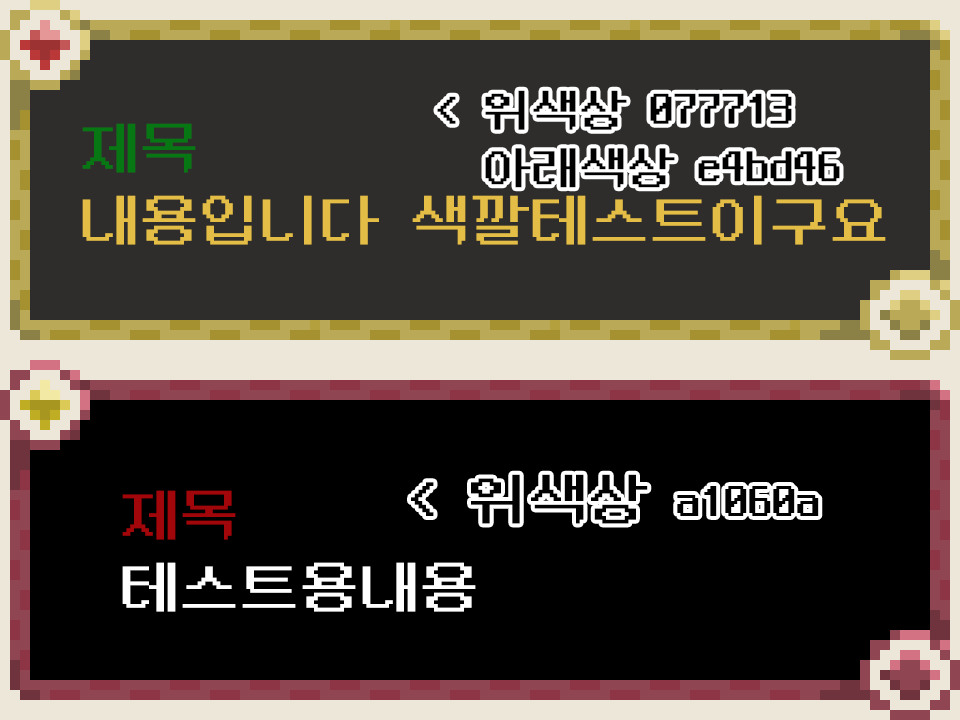
<style>
.page{position:relative;width:960px;height:720px;background:#000000}
.page>*{position:absolute;margin:0}
.t1{font:48px "NeoDunggeunmo-Regular";color:#020202}
.t2{font:60px "NeoDunggeunmo-Regular";color:#e4bd46}
.t3{font:60px "NeoDunggeunmo-Regular";color:#077713}
.t4{font:60px "NeoDunggeunmo-Regular";color:#020202}
.t5{font:60px "NeoDunggeunmo-Regular";color:#fefefe}
.t6{font:60px "NeoDunggeunmo-Regular";color:#a1060a}
</style>
<div class="page">
<p class="t1" style="left:437px;top:90px;width:403px;height:98px;text-align:center">&lt; 위색상 077713    <br>아래색상 e4bd46</p>
<p class="t2" style="left:82px;top:123px;width:804px;height:122px;text-align:center"><span class="t3">제목                       <br></span>내용입니다 색깔테스트이구요</p>
<p class="t1" style="left:411px;top:474px;width:408px;height:50px"><span class="t4">&lt; 위색상 </span>a1060a</p>
<p class="t5" style="left:122px;top:490px;width:354px;height:122px;text-align:center"><span class="t6">제목        <br></span>테스트용내용</p>
</div>
